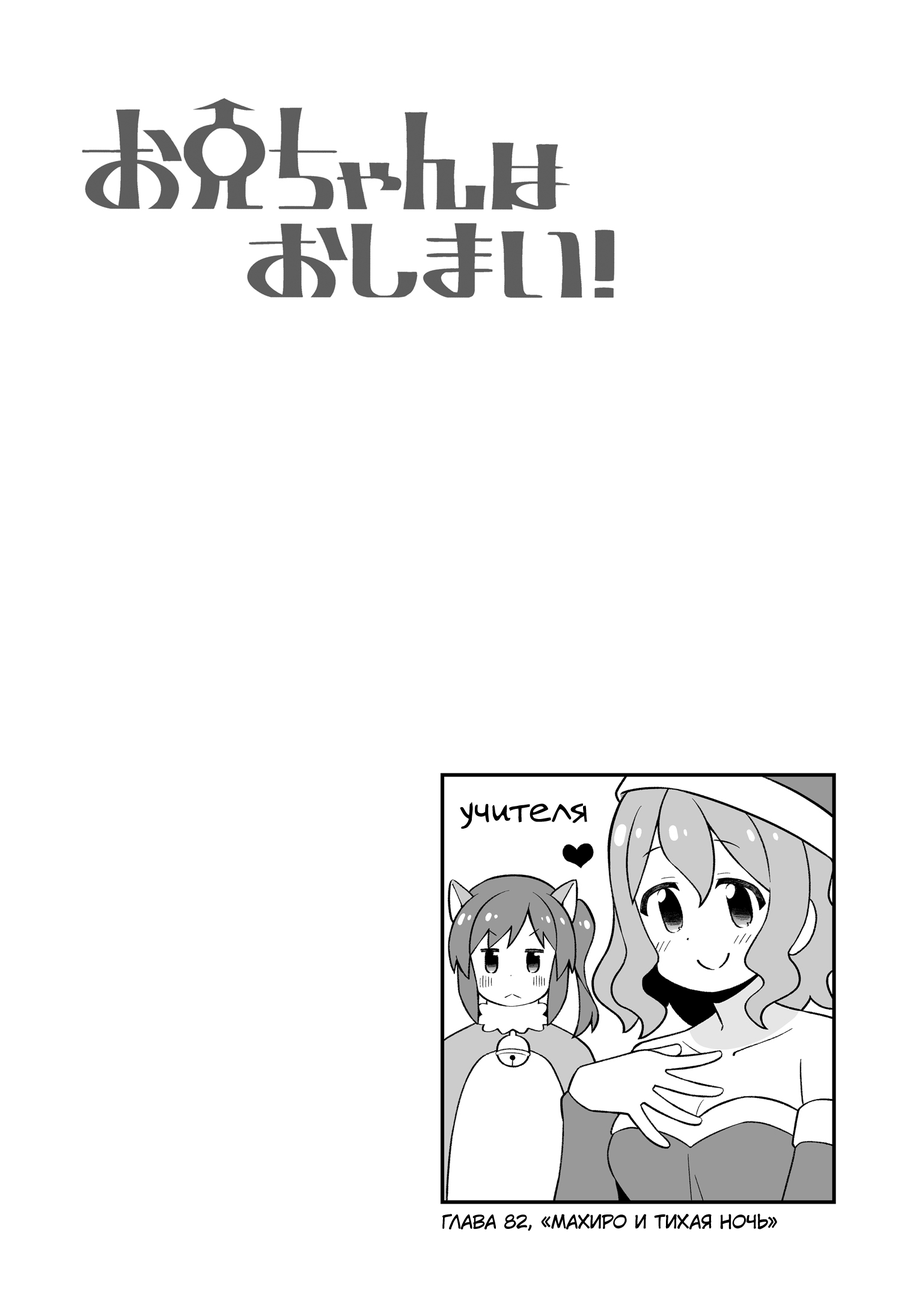
<style>
.page{position:relative;width:919px;height:1298px;background:#ffffff}
.page>*{position:absolute;margin:0}
.t1{font:36.1px "v_Augie";color:#000000}
.t2{font:18px "KuraiVoice2";color:#000000;text-transform:uppercase}
</style>
<div class="page">
<p class="t1" style="left:460px;top:802px;width:127px;height:27px">учителя</p>
<p class="t2" style="left:442px;top:1213px;width:335px;height:18px">Глава 82, «Махиро и тихая ночь»</p>
</div>
